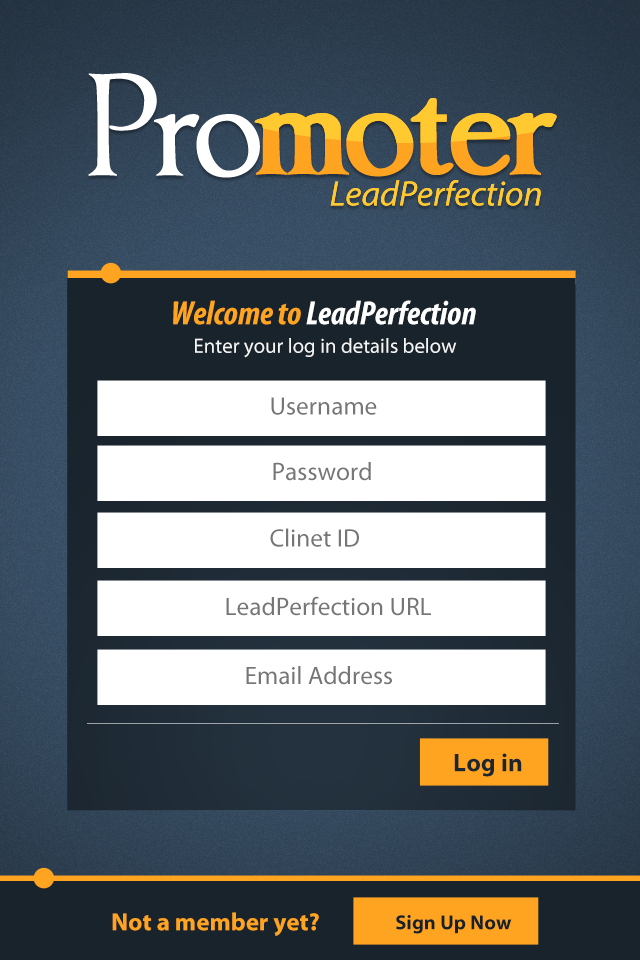
<style>
.page{position:relative;width:640px;height:960px}
.page>*{position:absolute;margin:0}
.t1{font:33.7px "MyriadPro-BoldCondIt";color:#ffffff}
.t2{font:33.7px "MyriadPro-BoldCondIt";color:#ffa421}
.t3{font:20.8px "MyriadPro-Regular";color:#f6f6f6}
.t4{font:25.4px "MyriadPro-Regular";color:#767676}
.t5{font:25.5px "MyriadPro-Bold";color:#1b2631}
.t6{font:24.9px "MyriadPro-Bold";color:#ffa421}
.t7{font:20.4px "MyriadPro-Bold";color:#17212a}
</style>
<div class="page">
<p class="t1" style="left:173px;top:300px;width:303px;height:25px"><span class="t2">Welcome to </span>LeadPerfection</p>
<p class="t3" style="left:195px;top:338px;width:262px;height:20px">Enter your log in details below</p>
<p class="t4" style="left:271px;top:397px;width:106px;height:18px">Username</p>
<p class="t4" style="left:273px;top:462px;width:98px;height:19px">Password</p>
<p class="t4" style="left:270px;top:528px;width:89px;height:19px">Clinet ID</p>
<p class="t4" style="left:226px;top:596px;width:205px;height:20px">LeadPerfection URL</p>
<p class="t4" style="left:246px;top:666px;width:146px;height:19px">Email Address</p>
<p class="t5" style="left:454px;top:753px;width:68px;height:24px">Log in</p>
<p class="t6" style="left:112px;top:912px;width:207px;height:24px">Not a member yet?</p>
<p class="t7" style="left:396px;top:915px;width:116px;height:19px">Sign Up Now</p>
</div>
